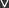
<style>
.page{position:relative;width:9px;height:8px;background:#333333}
.page>*{position:absolute;margin:0}
.t1{font:15.6px "STHeitiSC-Light";letter-spacing:0.22em;color:#ffffff}
</style>
<div class="page">
<p class="t1" style="left:0px;top:0px;width:9px;height:8px;rotate:90deg">&gt;</p>
</div>
